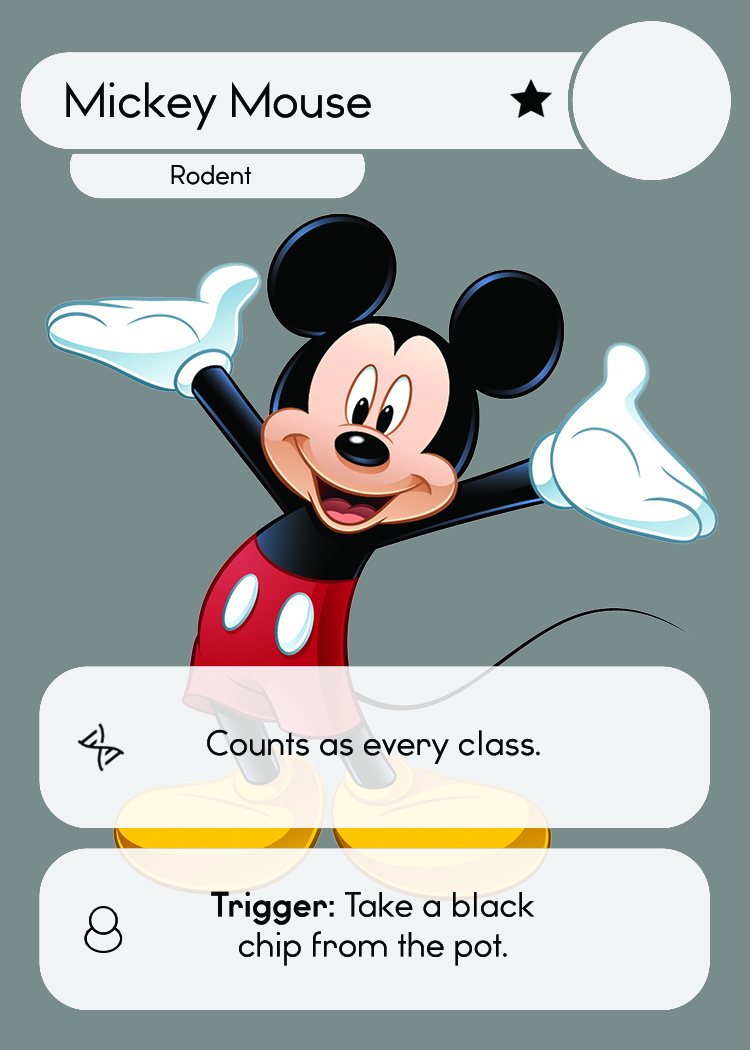
<style>
.page{position:relative;width:750px;height:1050px;background:#788c8c}
.page>*{position:absolute;margin:0}
.t1{font:46.7px "WatchwordRegularDemo";color:#060808}
.t2{font:25.5px "WatchwordRegularDemo";color:#060808}
.t3{font:33.3px "WatchwordRegularDemo";color:#060808}
.t4{font:33.3px "Dosis-Medium";color:#060808}
.t5{font:33.3px "WatchwordBoldDemo";color:#060808}
</style>
<div class="page">
<p class="t1" style="left:66px;top:81px;width:305px;height:49px">Mickey Mouse</p>
<p class="t2" style="left:171px;top:165px;width:80px;height:20px">Rodent</p>
<p class="t3" style="left:207px;top:729px;width:333px;height:35px">Counts as every class<span class="t4">.</span></p>
<p class="t3" style="left:211px;top:891px;width:324px;height:75px;text-align:center"><span class="t5">Trigger: </span>Take a black<br>chip from the pot<span class="t4">.</span></p>
</div>
